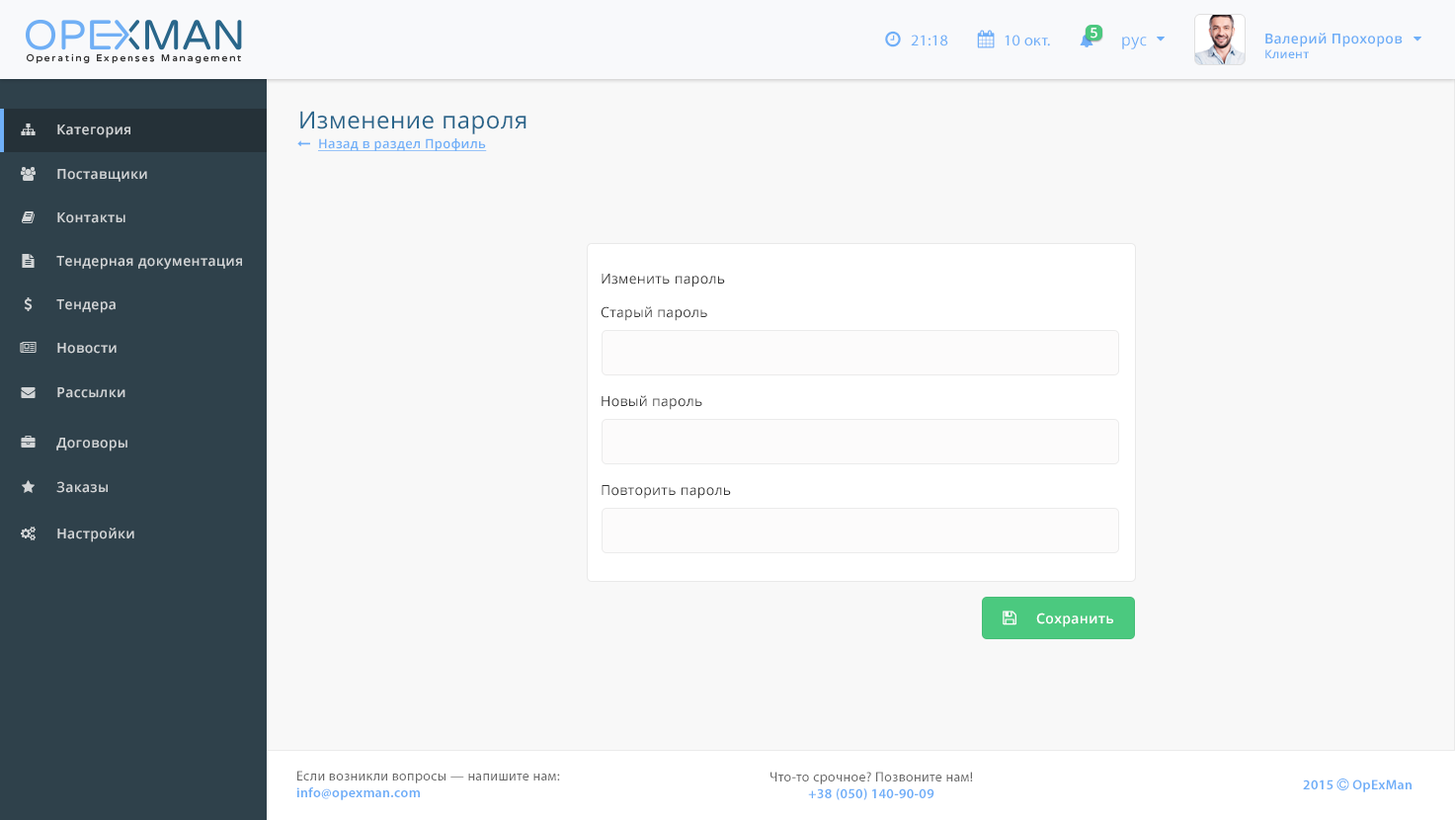
<style>
.page{position:relative;width:1455px;height:820px;background:#f8f8f8}
.page>*{position:absolute;margin:0}
.t1{font:13.8px "OpenSans-Semibold";letter-spacing:0.025em;color:#ffffff}
.t2{font:15.7px "MyriadPro-Regular";letter-spacing:0.025em;color:#6faff8}
.t3{font:15.7px "OpenSans";letter-spacing:0.025em;color:#6eaff8}
.t4{font:13.8px "OpenSans-Semibold";letter-spacing:0.025em;color:#6eaef7}
.t5{font:11.8px "OpenSans-Semibold";letter-spacing:0.025em;color:#6eaef7}
.t6{font:23.6px "OpenSans";letter-spacing:0.025em;color:#29658b}
.t7{font:13.8px "OpenSans-Semibold";letter-spacing:0.025em;color:#d2d5d7}
.t8{font:12.8px "OpenSans-Semibold";letter-spacing:0.025em;color:#6faff8;text-decoration:underline}
.t9{font:13.8px "OpenSans";letter-spacing:0.025em;color:#333333}
.t10{font:13.8px "MyriadPro-Regular";letter-spacing:0.025em;color:#696969}
.t11{font:13.8px "MyriadPro-Semibold";letter-spacing:0.025em;color:#6eaef8}
</style>
<div class="page">
<p class="t1" style="left:1090px;top:28px;width:7px;height:11px">5</p>
<p class="t2" style="left:911px;top:35px;width:37px;height:11px">21:18</p>
<p class="t2" style="left:1004px;top:35px;width:46px;height:11px">10 окт.</p>
<p class="t3" style="left:1122px;top:37px;width:25px;height:12px">рус</p>
<p class="t4" style="left:1265px;top:33px;width:137px;height:25px">Валерий Прохоров<br><span class="t5">Клиент</span></p>
<p class="t6" style="left:300px;top:111px;width:226px;height:23px">Изменение пароля</p>
<p class="t7" style="left:57px;top:124px;width:73px;height:14px">Категория</p>
<p class="t8" style="left:318px;top:138px;width:169px;height:13px">Назад в раздел Профиль</p>
<p class="t7" style="left:57px;top:169px;width:90px;height:13px">Поставщики</p>
<p class="t7" style="left:57px;top:212px;width:68px;height:11px">Контакты</p>
<p class="t7" style="left:56px;top:256px;width:186px;height:14px">Тендерная документация</p>
<p class="t9" style="left:601px;top:274px;width:124px;height:13px">Изменить пароль</p>
<p class="t7" style="left:56px;top:299px;width:60px;height:14px">Тендера</p>
<p class="t9" style="left:600px;top:306px;width:107px;height:15px">Старый пароль</p>
<p class="t7" style="left:57px;top:343px;width:60px;height:11px">Новости</p>
<p class="t7" style="left:57px;top:387px;width:68px;height:11px">Рассылки</p>
<p class="t9" style="left:601px;top:395px;width:101px;height:15px">Новый пароль</p>
<p class="t7" style="left:56px;top:438px;width:71px;height:13px">Договоры</p>
<p class="t7" style="left:56px;top:481px;width:52px;height:12px">Заказы</p>
<p class="t9" style="left:601px;top:485px;width:130px;height:14px">Повторить пароль</p>
<p class="t7" style="left:57px;top:527px;width:77px;height:15px">Настройки</p>
<p class="t1" style="left:1036px;top:612px;width:77px;height:15px">Сохранить</p>
<p class="t10" style="left:296px;top:770px;width:264px;height:30px">Если возникли вопросы — напишите нам:<br><span class="t11">info@opexman.com</span></p>
<p class="t10" style="left:770px;top:771px;width:203px;height:29px;text-align:center">Что-то срочное? Позвоните нам!<br><span class="t11">+38 (050) 140-90-09</span></p>
</div>
